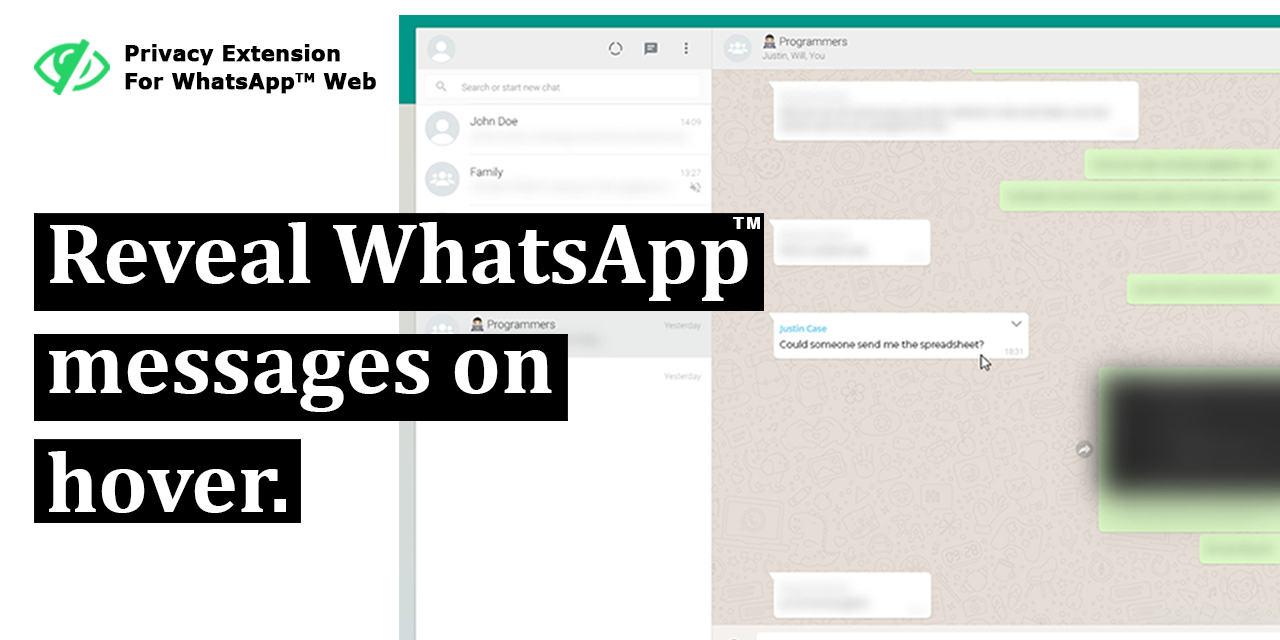
<style>
.page{position:relative;width:1280px;height:640px;background:#ffffff}
.page>*{position:absolute;margin:0}
.t1{font:20.8px/28.2px "Verdana-Bold";color:#000000;font-weight:bold}
.t2{font:87.3px/109.6px "Cambria-Bold";color:#ffffff}
.t3{font:87.3px/118.6px "Cambria-Bold";color:#ffffff}
.t4{font:16px "Arial-Black";letter-spacing:0.1em;color:#ffffff}
</style>
<div class="page">
<p class="t1" style="left:125px;top:44px;width:251px;height:50px">Privacy Extension<br>For WhatsAppTM Web</p>
<p class="t2" style="left:48px;top:222px;width:700px;height:291px">Reveal WhatsApp messages on <span class="t3">hover.</span></p>
<p class="t4" style="left:733px;top:217px;width:27px;height:12px">TM</p>
</div>
